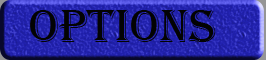
<style>
.page{position:relative;width:266px;height:60px}
.page>*{position:absolute;margin:0}
.t1{font:48px "Algerian";color:#030303}
</style>
<div class="page">
<p class="t1" style="left:30px;top:10px;width:186px;height:32px">OPTIONS</p>
</div>
